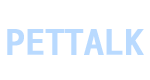
<style>
.page{position:relative;width:150px;height:80px;background:#ffffff}
.page>*{position:absolute;margin:0}
.t1{font:37.5px "D2CodingBold";color:#b9daff;font-weight:bold}
</style>
<div class="page">
<p class="t1" style="left:7px;top:29px;width:137px;height:26px">PETTALK</p>
</div>
